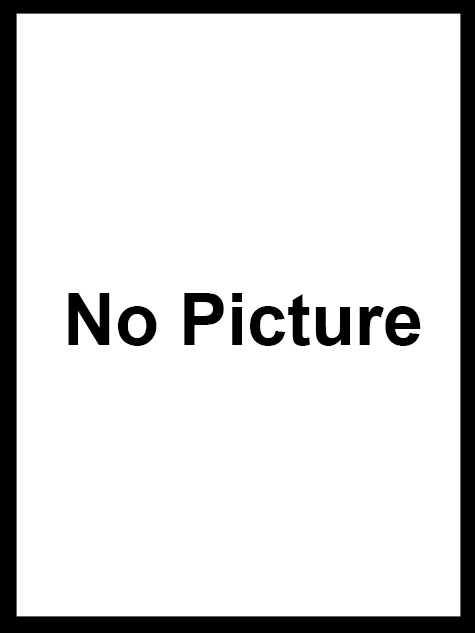
<style>
.page{position:relative;width:475px;height:633px;background:#ffffff}
.page>*{position:absolute;margin:0}
.t1{font:72px "Arial-BoldMT";color:#000000}
</style>
<div class="page">
<p class="t1" style="left:68px;top:293px;width:353px;height:53px">No Picture</p>
</div>
